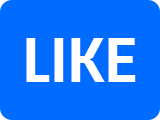
<style>
.page{position:relative;width:160px;height:120px;background:#006cff}
.page>*{position:absolute;margin:0}
.t1{font:60px "EncodeSansCompressed-Bold";letter-spacing:0.015em;color:#ffffff}
</style>
<div class="page">
<p class="t1" style="left:26px;top:38px;width:110px;height:44px">LIKE</p>
</div>
